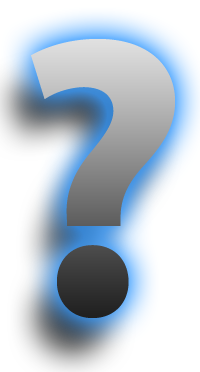
<style>
.page{position:relative;width:200px;height:372px;background:#ffffff}
.page>*{position:absolute;margin:0}
.t1{font:400px "MyriadPro-Bold"}
</style>
<div class="page">
<p class="t1" style="left:31px;top:39px;width:144px;height:279px">?</p>
</div>
